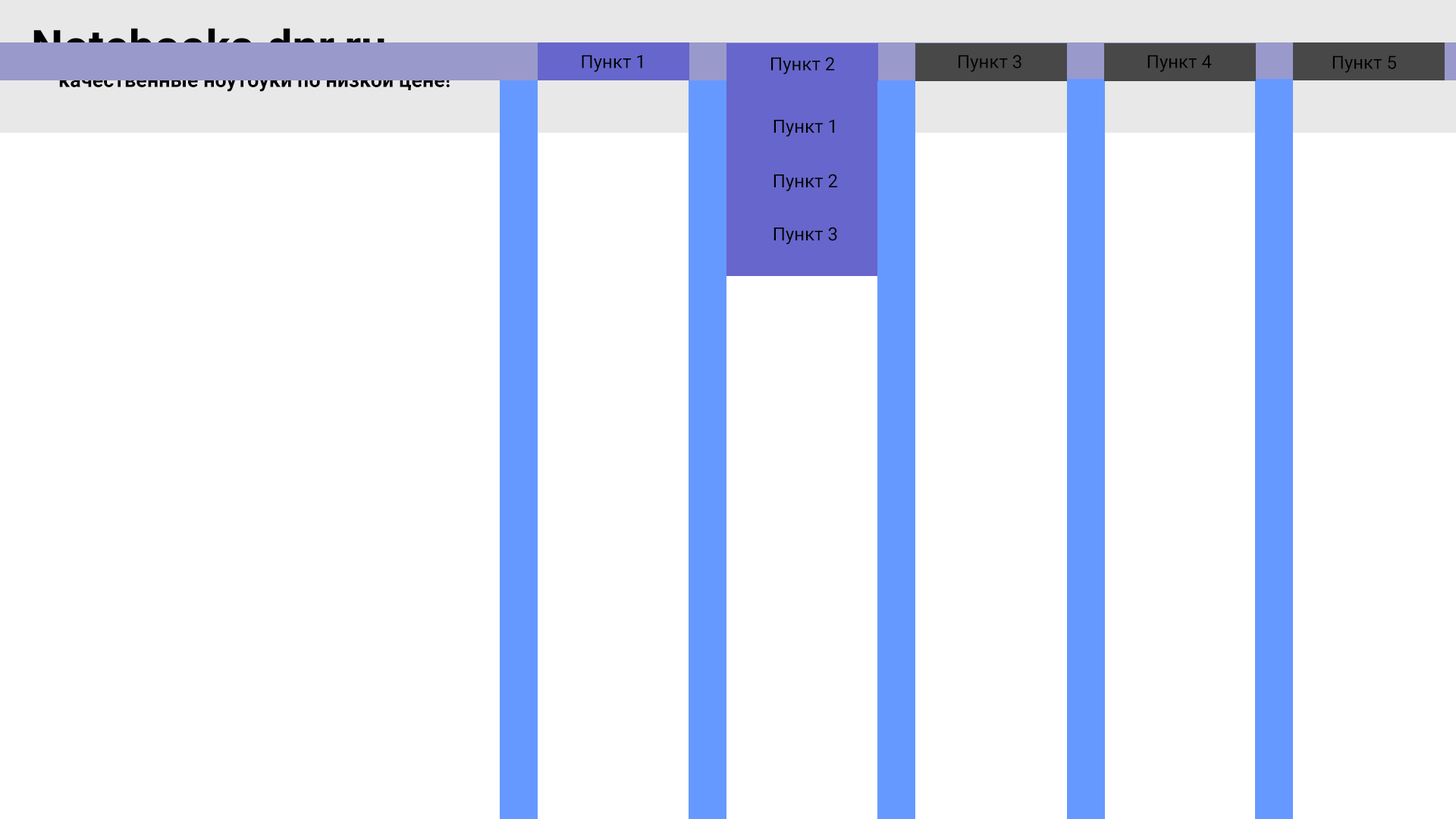
<style>
.page{position:relative;width:1456px;height:819px;background:#ffffff}
.page>*{position:absolute;margin:0}
.t1{font:20.5px "Roboto-Bold"}
.t2{font:45.5px "Roboto-Bold"}
.t3{font:18.2px "Roboto-Regular";color:#000000}
</style>
<div class="page">
<p class="t1" style="left:33px;top:28px;width:417px;height:64px"><span class="t2">Notebooks.dnr.ru<br></span> качественные ноутбуки по низкой цене!</p>
<p class="t3" style="left:582px;top:55px;width:60px;height:17px">Пункт 1</p>
<p class="t3" style="left:771px;top:57px;width:64px;height:17px">Пункт 2</p>
<p class="t3" style="left:959px;top:55px;width:62px;height:17px">Пункт 3</p>
<p class="t3" style="left:1147px;top:55px;width:65px;height:17px">Пункт 4</p>
<p class="t3" style="left:1332px;top:55px;width:64px;height:18px">Пункт 5</p>
<p class="t3" style="left:773px;top:119px;width:61px;height:17px">Пункт 1</p>
<p class="t3" style="left:773px;top:174px;width:64px;height:17px">Пункт 2</p>
<p class="t3" style="left:773px;top:227px;width:64px;height:17px">Пункт 3</p>
</div>
